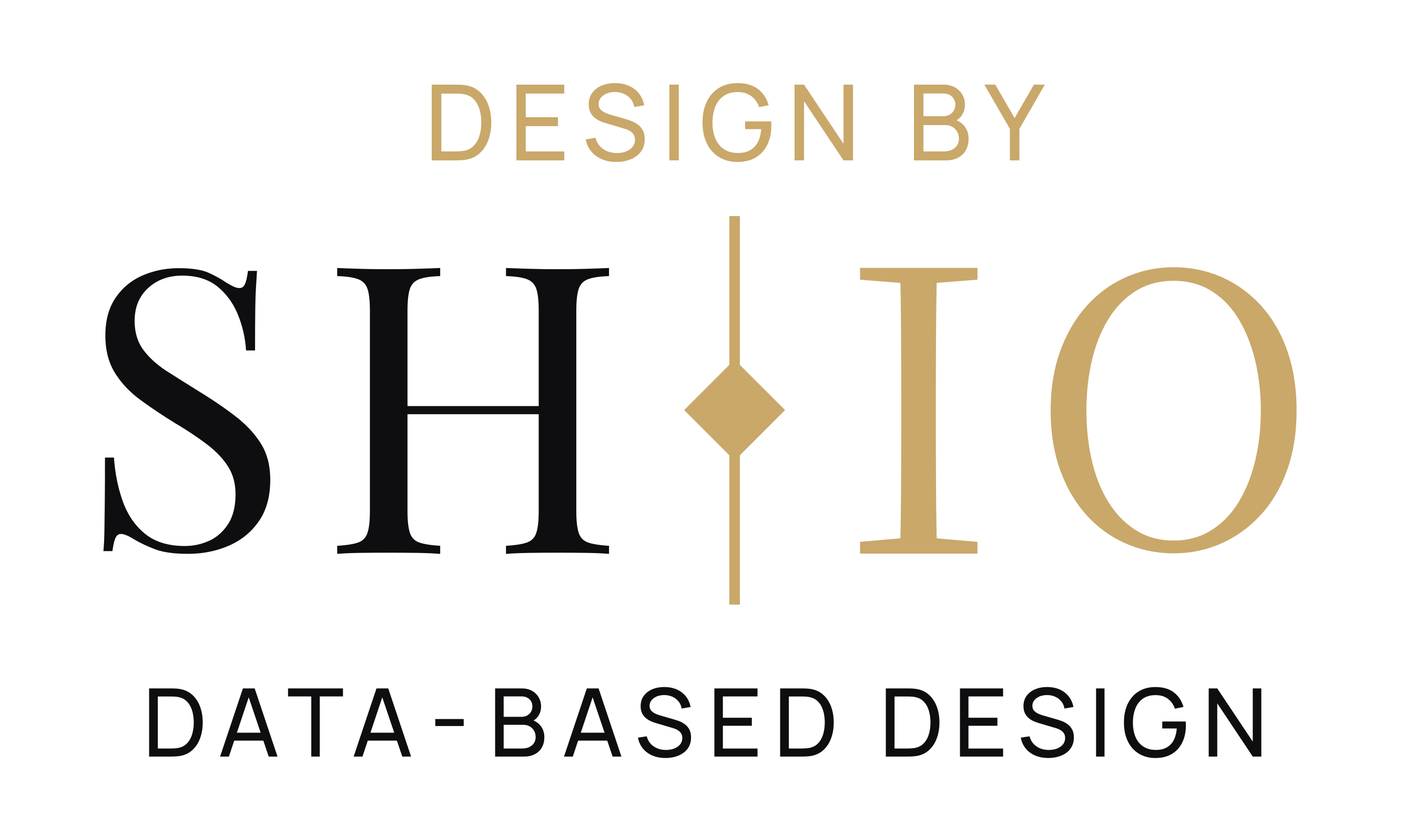
<style>
.page{position:relative;width:1424px;height:837px;background:#ffffff}
.page>*{position:absolute;margin:0}
.t1{font:105.2px "Manrope-Medium";letter-spacing:0.12em;color:#c9a86a}
.t2{font:389.8px "PlayfairDisplay-Regular";letter-spacing:0.12em;color:#0e0e10}
.t3{font:403.9px "PlayfairDisplay-Regular";letter-spacing:0.12em;color:#0e0e10}
.t4{font:392.6px "NotoSerifJP-Regular";letter-spacing:0.12em;color:#c9a86a}
.t5{font:376px "NotoSerifJP-Regular";letter-spacing:0.12em;color:#c9a86a}
.t6{font:94.7px "Manrope-Medium";letter-spacing:0.12em;color:#0e0e10}
</style>
<div class="page">
<p class="t1" style="left:432px;top:83px;width:613px;height:79px">DESIGN BY</p>
<p class="t2" style="left:103px;top:268px;width:507px;height:286px">S<span class="t3">H</span></p>
<p class="t4" style="left:860px;top:267px;width:437px;height:287px">I<span class="t5">O</span></p>
<p class="t6" style="left:149px;top:687px;width:1113px;height:71px">DATA-BASED DESIGN</p>
</div>
